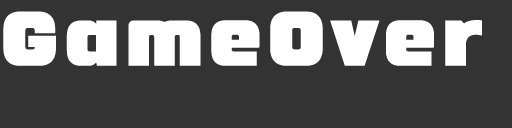
<style>
.page{position:relative;width:512px;height:128px;background:#333333}
.page>*{position:absolute;margin:0}
.t1{font:77.3px "NEOMETRA";letter-spacing:0.07em;color:#ffffff;scale:0.95 1}
</style>
<div class="page">
<p class="t1" style="left:3px;top:11px;width:479px;height:55px">GameOver</p>
</div>
